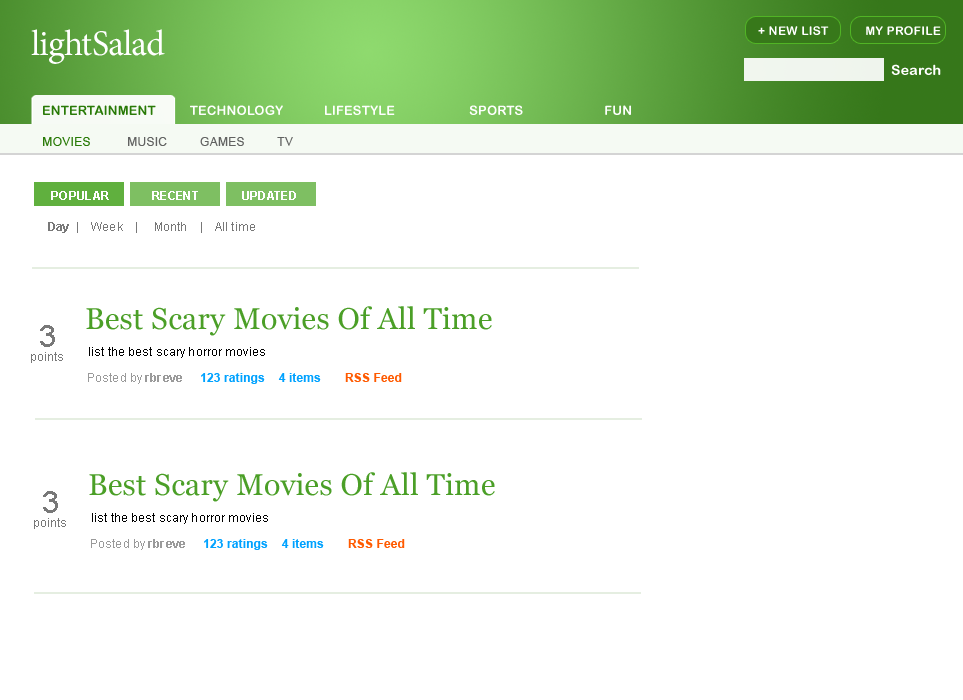
<style>
.page{position:relative;width:963px;height:700px;background:#ffffff}
.page>*{position:absolute;margin:0}
.t1{font:36px "MinionPro-Regular";letter-spacing:-0.025em;color:#ffffff}
.t2{font:12px "ArialRoundedMTBold";letter-spacing:0.025em;color:#ffffff}
.t3{font:14px "ArialRoundedMTBold";letter-spacing:0.025em;color:#ffffff}
.t4{font:12px "ArialMT";letter-spacing:0.025em;color:#616261}
.t5{font:12px "ArialMT";letter-spacing:0.025em;color:#297a07}
.t6{font:12px "Arial-BoldMT";letter-spacing:0.025em;color:#ffffff}
.t7{font:12px "ArialMT";letter-spacing:0.01em;color:#787878}
.t8{font:12px "Arial-BoldMT";letter-spacing:0.01em;color:#787878}
.t9{font:30px "Georgia";letter-spacing:0.01em;color:#4b9f27}
.t10{font:30px "ArialMT";letter-spacing:0.01em;color:#787878}
.t11{font:12px "ArialMT";letter-spacing:0.01em;color:#000000}
.t12{font:12px "ArialMT";letter-spacing:0.01em;color:#9a9a9a}
.t13{font:12px "Arial-BoldMT";letter-spacing:0.01em;color:#9a9a9a}
.t14{font:12px "Arial-BoldMT";letter-spacing:0.01em;color:#00a2ff}
.t15{font:12px "Arial-BoldMT";letter-spacing:0.01em;color:#ff5a00}
</style>
<div class="page">
<p class="t1" style="left:31px;top:29px;width:134px;height:35px">lightSalad</p>
<p class="t2" style="left:758px;top:26px;width:183px;height:9px">+ NEW LIST           MY PROFILE</p>
<p class="t3" style="left:891px;top:64px;width:50px;height:11px">Search</p>
<p class="t4" style="left:43px;top:137px;width:250px;height:9px"><span class="t5">MOVIES  </span>        MUSIC         GAMES         TV</p>
<p class="t6" style="left:51px;top:191px;width:245px;height:9px">POPULAR             RECENT             UPDATED</p>
<p class="t7" style="left:48px;top:222px;width:207px;height:11px"><span class="t8">Day</span>  |    Week    |     Month    |    All time</p>
<p class="t9" style="left:86px;top:306px;width:406px;height:30px">Best Scary Movies Of All Time</p>
<p class="t7" style="left:31px;top:325px;width:32px;height:38px;text-align:center"><span class="t10">3<br></span>points</p>
<p class="t11" style="left:89px;top:347px;width:176px;height:11px">list the best scary horror movies</p>
<p class="t12" style="left:88px;top:373px;width:94px;height:11px">Posted by <span class="t13">rbreve</span></p>
<p class="t14" style="left:201px;top:373px;width:201px;height:11px">123 ratings    4 items      <span class="t15"> RSS Feed</span></p>
</div>
